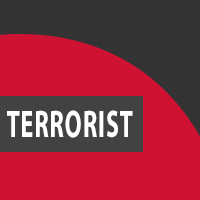
<style>
.page{position:relative;width:200px;height:200px;background:#d01232}
.page>*{position:absolute;margin:0}
.t1{font:38.6px "MyriadPro-Bold";letter-spacing:0.04em;color:#ffffff;text-transform:uppercase;scale:0.62 1}
</style>
<div class="page">
<p class="t1" style="left:7px;top:110px;width:126px;height:28px">TERRORIST</p>
</div>
